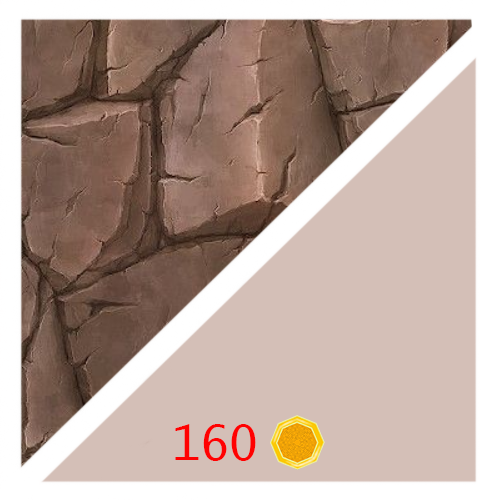
<style>
.page{position:relative;width:500px;height:500px;background:#d4bfb7}
.page>*{position:absolute;margin:0}
.t1{font:48px "LucidaConsole";color:#ff0101}
</style>
<div class="page">
<p class="t1" style="left:175px;top:424px;width:81px;height:37px">160</p>
</div>
